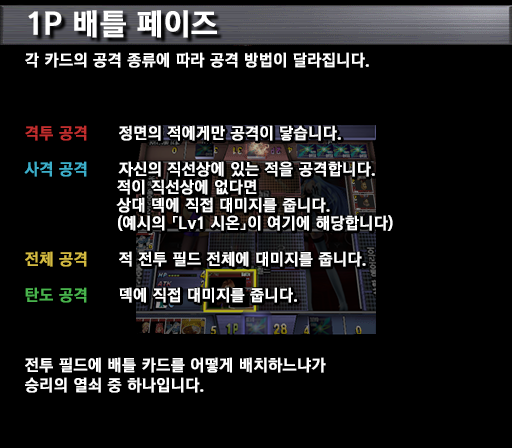
<style>
.page{position:relative;width:512px;height:448px;background:#000000}
.page>*{position:absolute;margin:0}
.t1{font:30px "KoreanGD15-R";color:#ffffff;font-weight:bold}
.t2{font:16px "KoreanGD15-R";color:#ffffff;font-weight:bold}
.t3{font:16px/18px "KoreanGD15-R";color:#ffffff;font-weight:bold}
.t4{font:16px/18px "KoreanGD15-R";color:#c12f2f;font-weight:bold}
.t5{font:16px/18px "KoreanGD15-R";color:#3dafca;font-weight:bold}
.t6{font:16px/18px "KoreanGD15-R";color:#d3ba41;font-weight:bold}
.t7{font:16px/18px "KoreanGD15-R";color:#49b34d;font-weight:bold}
.t8{font:16px/20px "KoreanGD15-R";color:#ffffff;font-weight:bold}
</style>
<div class="page">
<p class="t1" style="left:28px;top:10px;width:189px;height:28px">1P 배틀 페이즈</p>
<p class="t2" style="left:25px;top:52px;width:344px;height:16px">각 카드의 공격 종류에 따라 공격 방법이 달라집니다.</p>
<p class="t3" style="left:24px;top:125px;width:369px;height:178px"><span class="t4">격투 공격</span>      정면의 적에게만 공격이 닿습니다.<br><br><span class="t5">사격 공격</span>      자신의 직선상에 있는 적을 공격합니다.<br>                  적이 직선상에 없다면<br>                  상대 덱에 직접 대미지를 줍니다.<br>                  (예시의 「Lv1 시온」이 여기에 해당합니다)<br><br><span class="t6">전체 공격</span>      적 전투 필드 전체에 대미지를 줍니다.<br><br><span class="t7">탄도 공격</span>      덱에 직접 대미지를 줍니다.</p>
<p class="t8" style="left:25px;top:357px;width:301px;height:36px">전투 필드에 배틀 카드를 어떻게 배치하느냐가<br>승리의 열쇠 중 하나입니다.</p>
</div>
